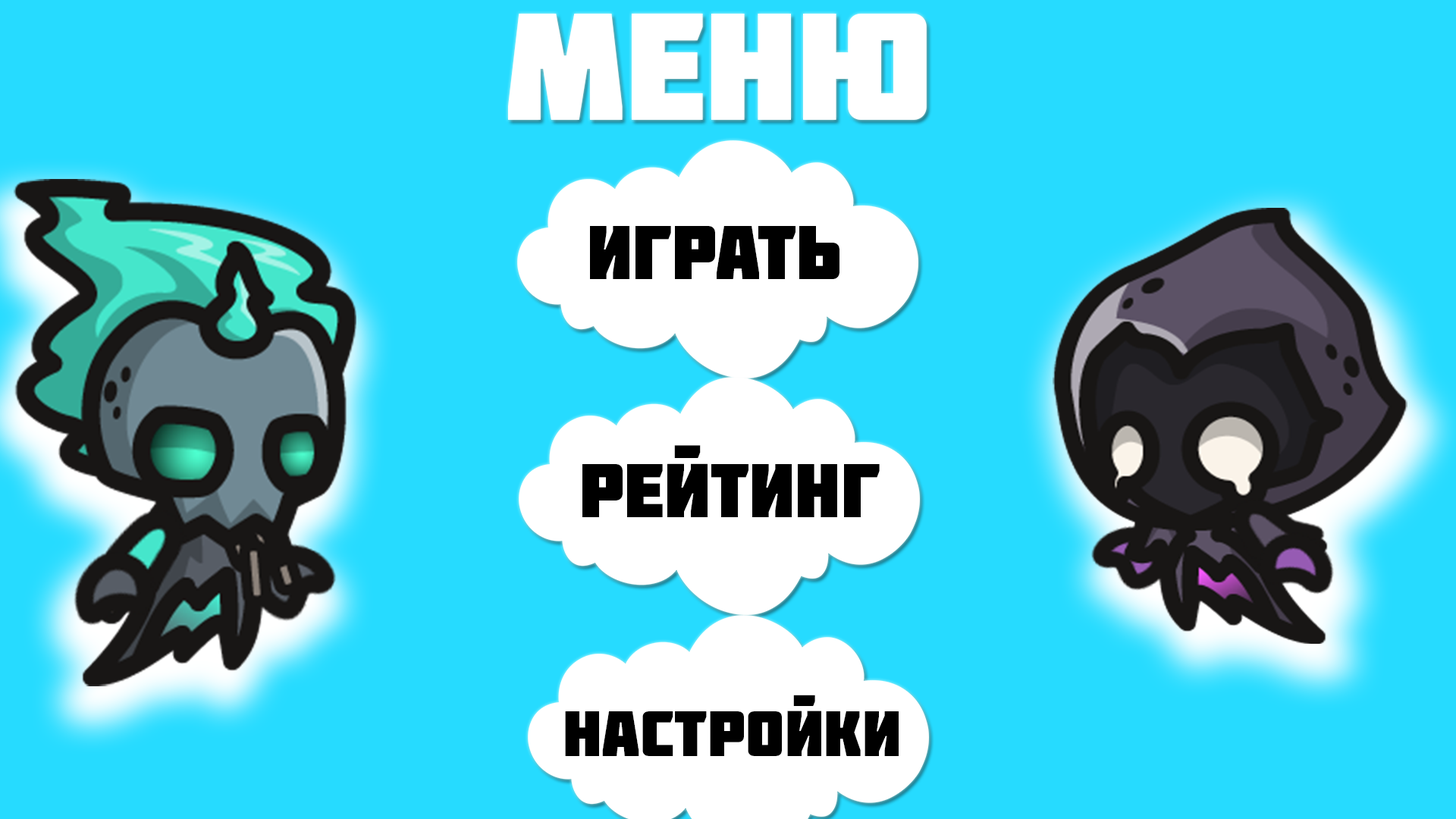
<style>
.page{position:relative;width:1456px;height:819px;background:#26dbff}
.page>*{position:absolute;margin:0}
.t1{font:151.7px "Molot";color:#ffffff}
.t2{font:75.8px "Molot";color:#000000}
.t3{font:64.5px "Molot";color:#000000}
</style>
<div class="page">
<p class="t1" style="left:508px;top:13px;width:419px;height:107px">меню</p>
<p class="t2" style="left:590px;top:226px;width:249px;height:53px">играть</p>
<p class="t2" style="left:582px;top:445px;width:298px;height:72px">рейтинг</p>
<p class="t3" style="left:565px;top:695px;width:334px;height:61px">настройки</p>
</div>
